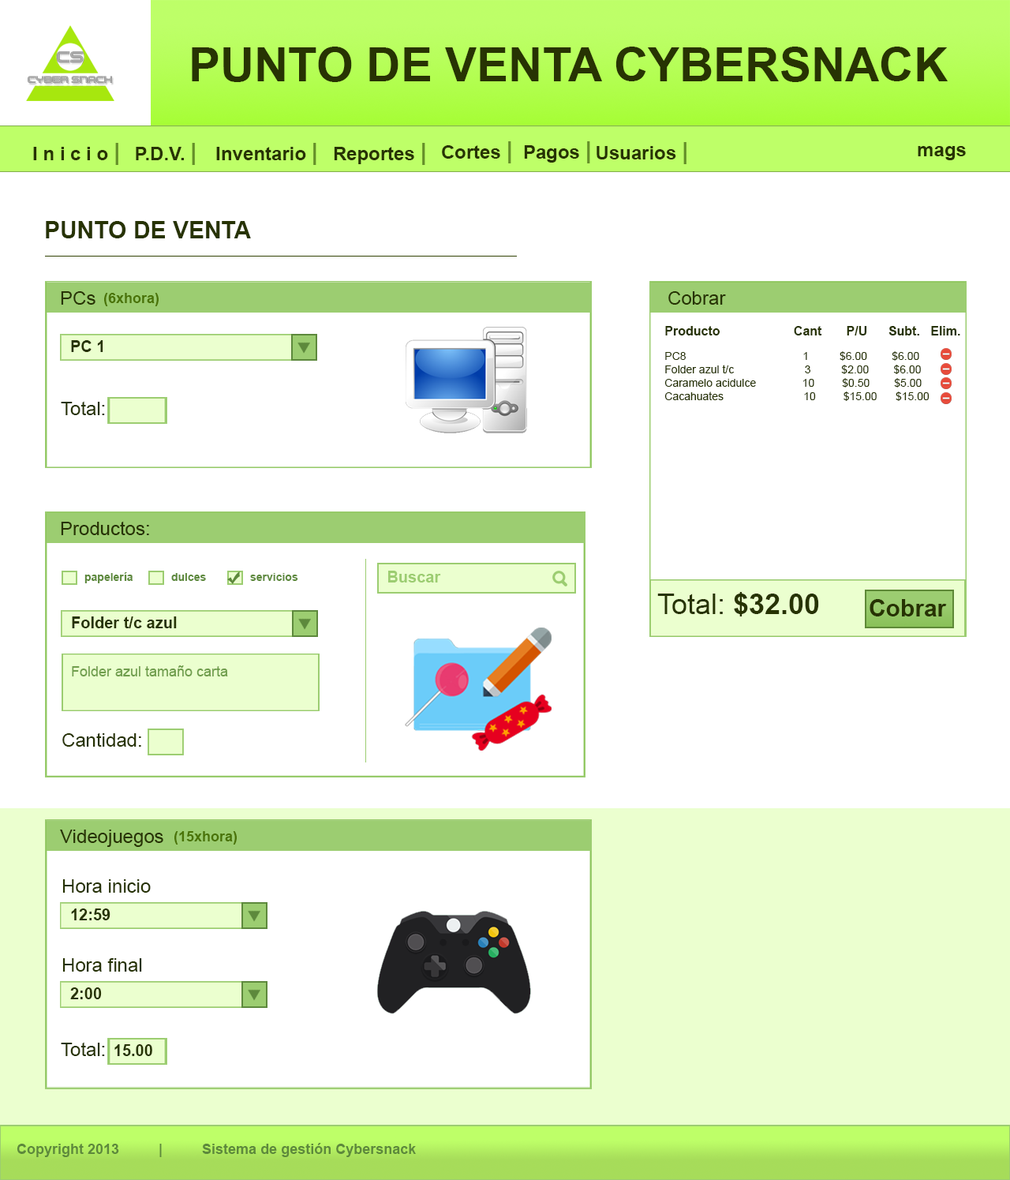
<style>
.page{position:relative;width:1010px;height:1180px;background:#ffffff}
.page>*{position:absolute;margin:0}
.t1{font:47.4px "Arial-BoldMT";color:#273303}
.t2{font:18.9px "Arial-BoldMT";color:#273303}
.t3{font:23.7px "Arial-BoldMT";color:#658f29}
.t4{font:23.7px "Arial-BoldMT";color:#273303}
.t5{font:18.9px "ArialMT";color:#273303}
.t6{font:14.2px "Arial-BoldMT";color:#4a7407}
.t7{font:12.6px "Arial-BoldMT";color:#273303}
.t8{font:15.8px "Arial-BoldMT";color:#273303}
.t9{font:11.1px "ArialMT";color:#273303}
.t10{font:11.1px "Arial-BoldMT";color:#5d893c}
.t11{font:15.8px "Arial-BoldMT";color:#9ccd71}
.t12{font:28.4px "ArialMT";color:#273303}
.t13{font:28.4px "Arial-BoldMT";color:#273303}
.t14{font:14.2px "ArialMT";color:#709e4d}
.t15{font:14.2px "Arial-BoldMT";color:#5d893c}
</style>
<div class="page">
<p class="t1" style="left:192px;top:47px;width:756px;height:35px">PUNTO DE VENTA CYBERSNACK</p>
<p class="t2" style="left:33px;top:143px;width:85px;height:22px">I n i c i o <span class="t3">|</span></p>
<p class="t2" style="left:136px;top:143px;width:59px;height:22px">P.D.V. <span class="t3">|</span></p>
<p class="t2" style="left:216px;top:143px;width:101px;height:22px">Inventario <span class="t3">|</span></p>
<p class="t2" style="left:334px;top:143px;width:91px;height:22px">Reportes <span class="t3">|</span></p>
<p class="t2" style="left:442px;top:141px;width:70px;height:22px">Cortes <span class="t3">|</span></p>
<p class="t2" style="left:524px;top:141px;width:66px;height:22px">Pagos <span class="t3">|</span></p>
<p class="t2" style="left:597px;top:142px;width:90px;height:22px">Usuarios <span class="t3">|</span></p>
<p class="t2" style="left:918px;top:146px;width:48px;height:14px">mags</p>
<p class="t4" style="left:46px;top:221px;width:205px;height:17px">PUNTO DE VENTA</p>
<p class="t5" style="left:61px;top:291px;width:35px;height:14px">PCs</p>
<p class="t6" style="left:104px;top:293px;width:55px;height:13px">(6xhora)</p>
<p class="t5" style="left:669px;top:291px;width:57px;height:14px">Cobrar</p>
<p class="t7" style="left:665px;top:326px;width:296px;height:9px">Producto                     Cant       P/U      Subt.   Elim.</p>
<p class="t8" style="left:71px;top:340px;width:32px;height:12px">PC 1</p>
<p class="t9" style="left:665px;top:351px;width:265px;height:50px">PC8                                      1          $6.00        $6.00 <br>Folder azul t/c                       3          $2.00        $6.00<br>Caramelo acidulce               10         $0.50        $5.00<br>Cacahuates                          10         $15.00      $15.00</p>
<p class="t5" style="left:61px;top:401px;width:44px;height:14px">Total:</p>
<p class="t5" style="left:61px;top:521px;width:88px;height:14px">Productos:</p>
<p class="t10" style="left:84px;top:572px;width:49px;height:11px">papelería</p>
<p class="t10" style="left:171px;top:573px;width:35px;height:8px">dulces</p>
<p class="t10" style="left:250px;top:573px;width:48px;height:8px">servicios</p>
<p class="t11" style="left:388px;top:571px;width:53px;height:12px">Buscar</p>
<p class="t12" style="left:658px;top:592px;width:161px;height:25px">Total: <span class="t13">$32.00</span></p>
<p class="t4" style="left:870px;top:599px;width:77px;height:18px">Cobrar</p>
<p class="t8" style="left:72px;top:617px;width:105px;height:11px">Folder t/c azul</p>
<p class="t14" style="left:72px;top:665px;width:156px;height:12px">Folder azul tamaño carta</p>
<p class="t5" style="left:62px;top:733px;width:79px;height:14px">Cantidad:</p>
<p class="t5" style="left:60px;top:830px;width:103px;height:17px">Videojuegos</p>
<p class="t6" style="left:174px;top:831px;width:63px;height:14px">(15xhora)</p>
<p class="t5" style="left:62px;top:879px;width:89px;height:14px">Hora inicio</p>
<p class="t8" style="left:71px;top:909px;width:40px;height:11px">12:59</p>
<p class="t5" style="left:62px;top:958px;width:80px;height:14px">Hora final</p>
<p class="t8" style="left:70px;top:988px;width:32px;height:11px">2:00</p>
<p class="t5" style="left:61px;top:1042px;width:44px;height:14px">Total:</p>
<p class="t8" style="left:114px;top:1044px;width:38px;height:12px">15.00</p>
<p class="t15" style="left:17px;top:1143px;width:399px;height:14px">Copyright 2013          |          Sistema de gestión Cybersnack</p>
</div>
